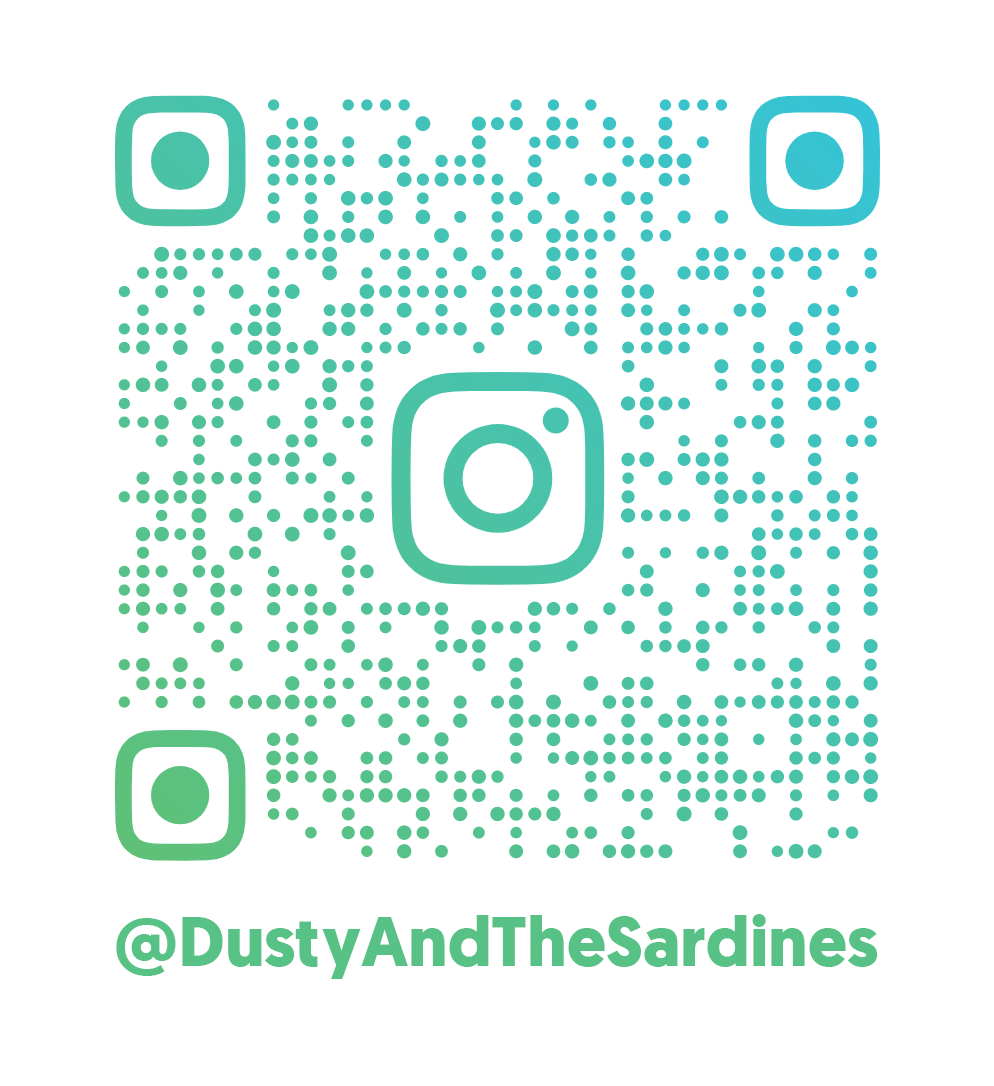
<style>
.page{position:relative;width:994px;height:1086px;background:#ffffff}
.page>*{position:absolute;margin:0}
.t1{font:70px "Geomanist-Bold";color:#58c185}
</style>
<div class="page">
<p class="t1" style="left:116px;top:914px;width:762px;height:65px">@DustyAndTheSardines</p>
</div>
